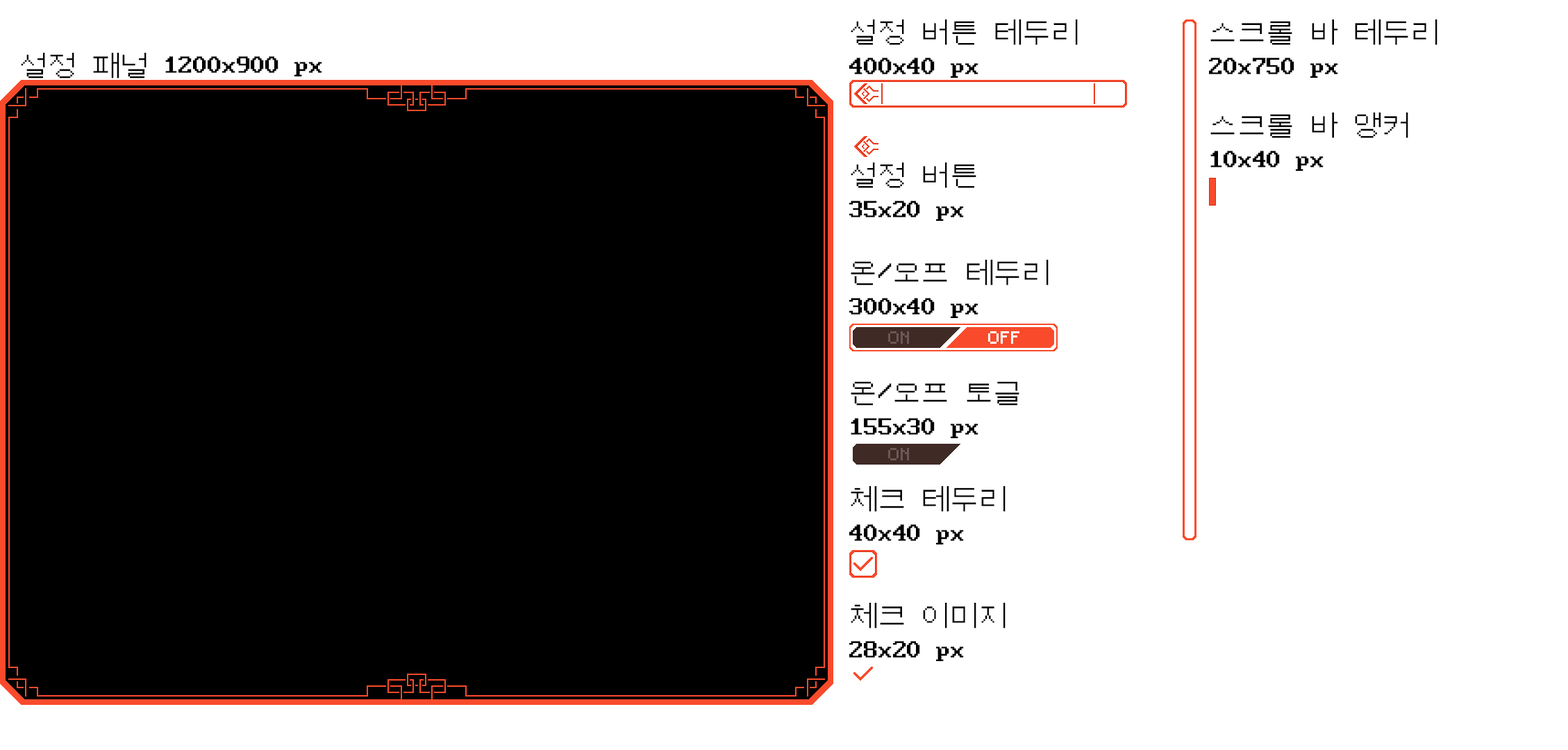
<style>
.page{position:relative;width:1568px;height:750px;background:#ffffff}
.page>*{position:absolute;margin:0}
.t1{font:28.9px "DOSGothic";color:#000000}
</style>
<div class="page">
<p class="t1" style="left:849px;top:19px;width:229px;height:59px">설정 버튼 테두리<br>400x40 px</p>
<p class="t1" style="left:1209px;top:19px;width:228px;height:59px">스크롤 바 테두리<br>20x750 px</p>
<p class="t1" style="left:21px;top:53px;width:301px;height:25px">설정 패널 1200x900 px</p>
<p class="t1" style="left:1210px;top:112px;width:198px;height:59px">스크롤 바 앵커<br>10x40 px</p>
<p class="t1" style="left:849px;top:162px;width:127px;height:59px">설정 버튼<br>35x20 px</p>
<p class="t1" style="left:849px;top:260px;width:200px;height:58px">온/오프 테두리<br>300x40 px</p>
<p class="t1" style="left:851px;top:381px;width:168px;height:57px">온/오프 토글 <br>155x30 px</p>
<p class="t1" style="left:849px;top:486px;width:157px;height:58px">체크 테두리<br>40x40 px</p>
<p class="t1" style="left:849px;top:603px;width:157px;height:58px">체크 이미지<br>28x20 px</p>
</div>
